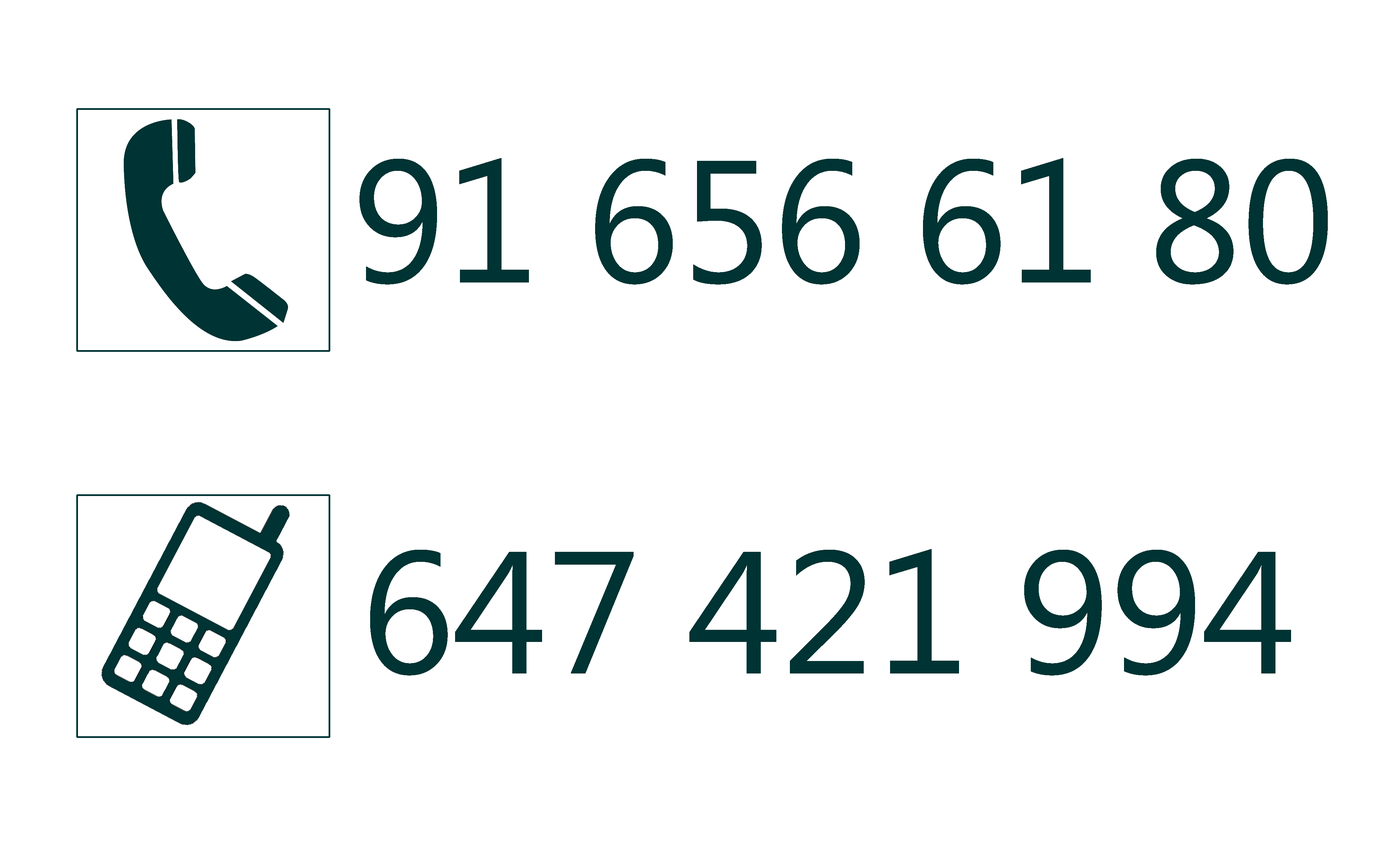
<style>
.page{position:relative;width:1385px;height:861px;background:#ffffff}
.page>*{position:absolute;margin:0}
.t1{font:173.3px "SegoeUISymbol";color:#003333}
</style>
<div class="page">
<p class="t1" style="left:359px;top:158px;width:969px;height:127px">91 656 61 80</p>
<p class="t1" style="left:370px;top:549px;width:921px;height:127px">647 421 994</p>
</div>
